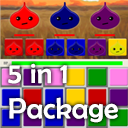
<style>
.page{position:relative;width:128px;height:128px}
.page>*{position:absolute;margin:0}
.t1{font:29.5px "BerlinSansFB-Reg";letter-spacing:0.01em;color:#ffffff}
</style>
<div class="page">
<p class="t1" style="left:8px;top:63px;width:110px;height:60px">5 in 1<br>Package</p>
</div>
